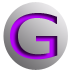
<style>
.page{position:relative;width:72px;height:72px;background:#ffffff}
.page>*{position:absolute;margin:0}
.t1{font:60.7px "Tahoma";scale:1.32 1}
</style>
<div class="page">
<p class="t1" style="left:10px;top:13px;width:48px;height:47px">G</p>
</div>
